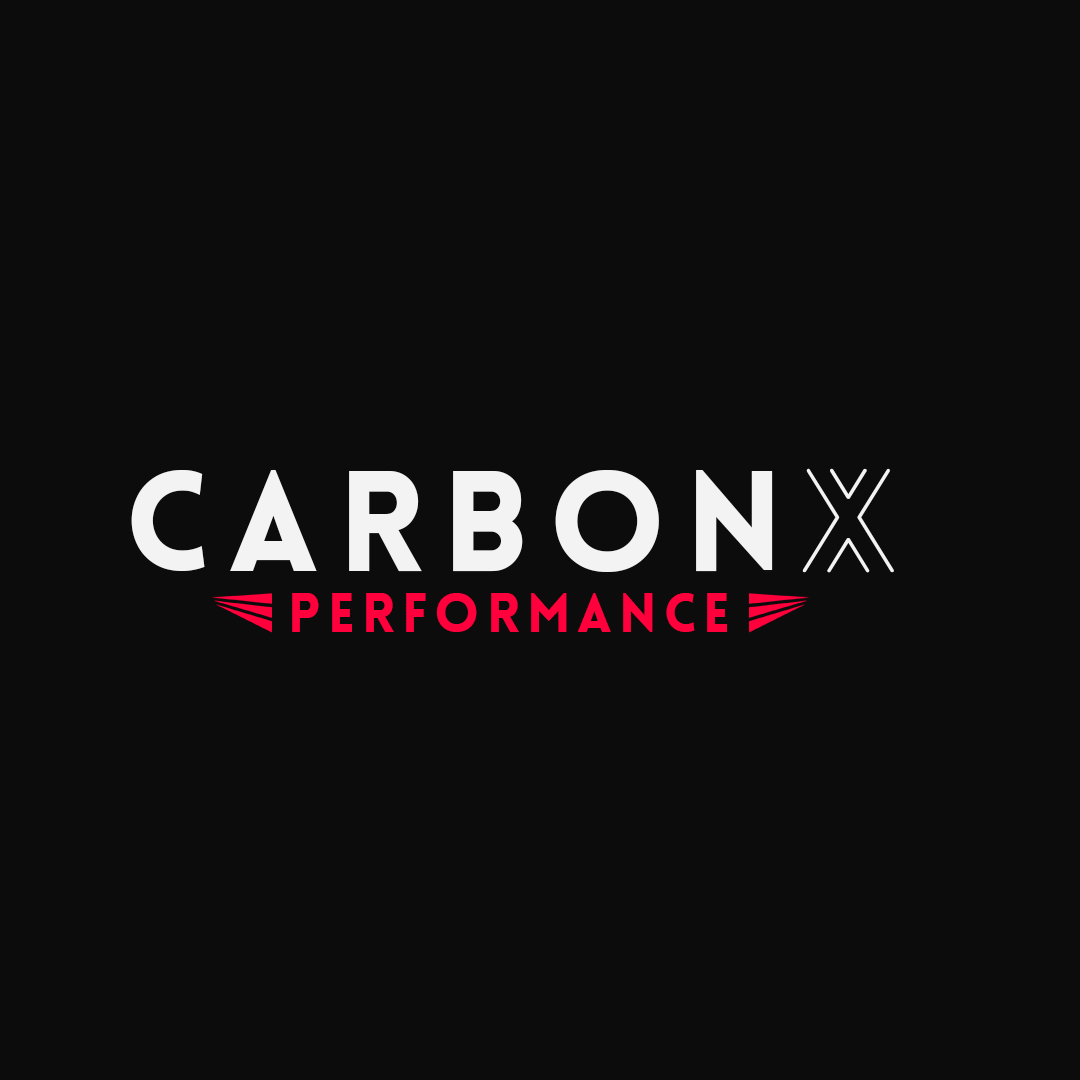
<style>
.page{position:relative;width:1080px;height:1080px;background:#0c0c0c}
.page>*{position:absolute;margin:0}
.t1{font:139.7px "Lovelo-Black";letter-spacing:0.135em;color:#f3f3f3}
.t2{font:139.7px "Lovelo-LineLight";letter-spacing:0.135em;color:#f3f3f3}
.t3{font:53.3px "Lovelo-Black";letter-spacing:0.135em;color:#ff003c}
</style>
<div class="page">
<p class="t1" style="left:131px;top:467px;width:763px;height:106px">carbon<span class="t2">x</span></p>
<p class="t3" style="left:292px;top:592px;width:435px;height:40px">performance</p>
</div>
